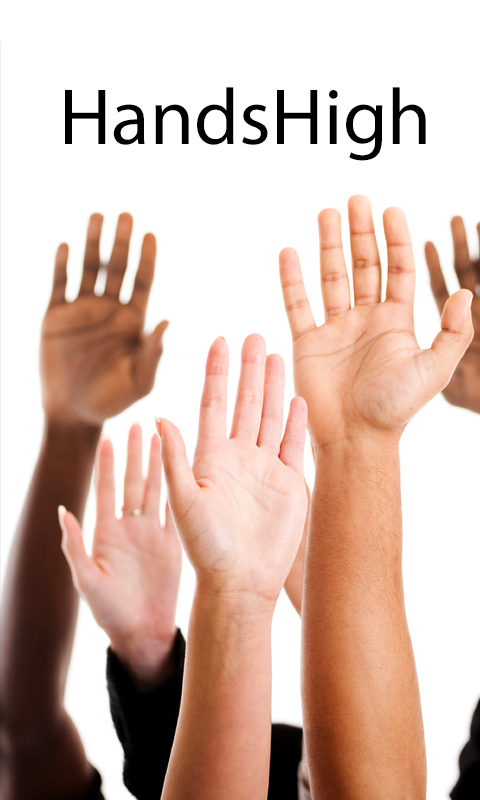
<style>
.page{position:relative;width:480px;height:800px;background:#ffffff}
.page>*{position:absolute;margin:0}
.t1{font:80px "MyriadPro-Regular";color:#000000}
</style>
<div class="page">
<p class="t1" style="left:65px;top:87px;width:361px;height:74px">HandsHigh</p>
</div>
